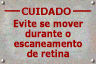
<style>
.page{position:relative;width:96px;height:64px}
.page>*{position:absolute;margin:0}
.t1{font:10px/10px "Tahoma-Bold";color:#a50000;font-weight:bold;scale:0.9 1}
</style>
<div class="page">
<p class="t1" style="left:13px;top:19px;width:70px;height:39px;text-align:center">Evite se mover<br>durante o<br>escaneamento<br>de retina</p>
</div>
